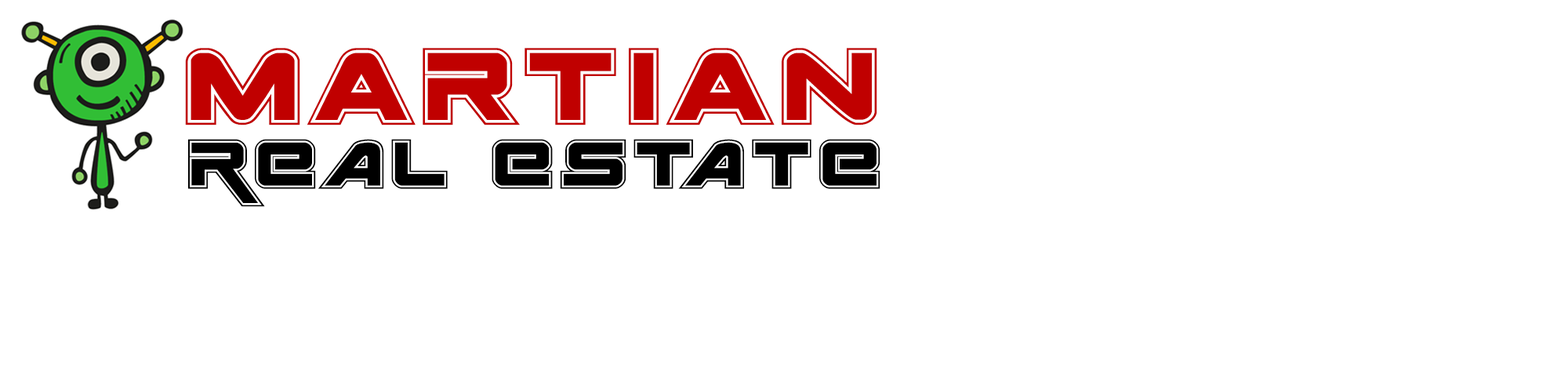
<style>
.page{position:relative;width:1568px;height:392px;background:#ffffff}
.page>*{position:absolute;margin:0}
.t1{font:152.3px "SpaceRangerAcademy";letter-spacing:0.05em;color:#c00000}
.t2{font:97.6px "SpaceRangerAcademy";letter-spacing:0.05em;color:#000000}
</style>
<div class="page">
<p class="t1" style="left:185px;top:48px;width:692px;height:77px">Martian</p>
<p class="t2" style="left:188px;top:139px;width:692px;height:68px">REAL ESTATE</p>
</div>
